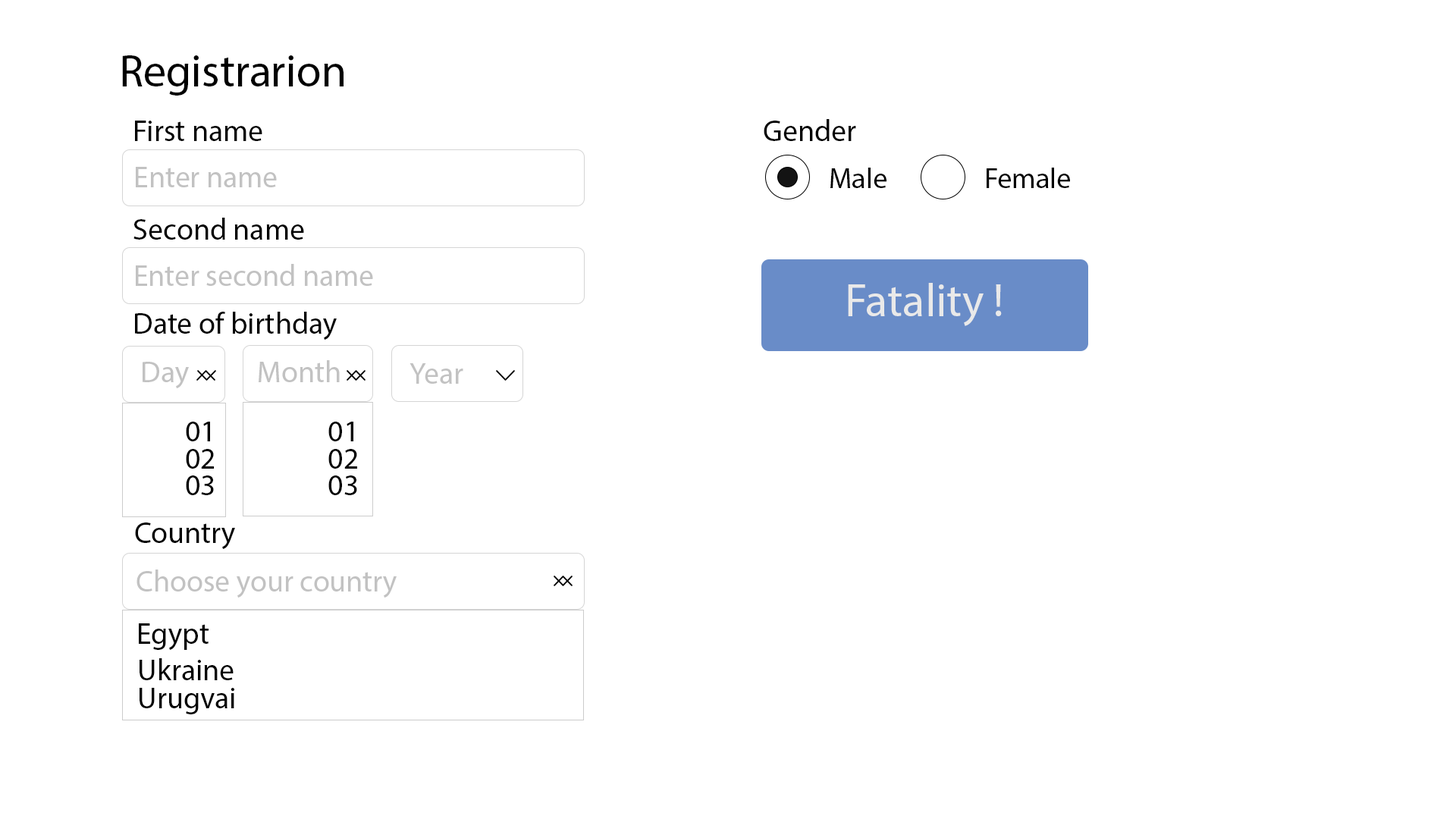
<style>
.page{position:relative;width:1456px;height:819px;background:#ffffff}
.page>*{position:absolute;margin:0}
.t1{font:45.2px "MyriadPro-Regular";color:#000000}
.t2{font:30.2px "MyriadPro-Regular";color:#000000}
.t3{font:30.2px "MyriadPro-Regular";color:#c2c2c2}
.t4{font:28.8px "MyriadPro-Regular";color:#000000}
.t5{font:46px "MyriadPro-Regular";color:#e9e9e9}
</style>
<div class="page">
<p class="t1" style="left:122px;top:55px;width:222px;height:41px">Registrarion</p>
<p class="t2" style="left:135px;top:121px;width:127px;height:20px">First name</p>
<p class="t2" style="left:764px;top:119px;width:92px;height:22px">Gender</p>
<p class="t3" style="left:136px;top:167px;width:141px;height:20px">Enter name</p>
<p class="t4" style="left:830px;top:168px;width:56px;height:20px">Male</p>
<p class="t4" style="left:987px;top:168px;width:83px;height:20px">Female</p>
<p class="t2" style="left:133px;top:218px;width:171px;height:22px">Second name</p>
<p class="t3" style="left:136px;top:264px;width:237px;height:22px">Enter second name</p>
<p class="t5" style="left:848px;top:283px;width:154px;height:43px">Fatality !</p>
<p class="t2" style="left:135px;top:312px;width:202px;height:28px">Date of birthday</p>
<p class="t3" style="left:143px;top:362px;width:46px;height:26px">Day</p>
<p class="t3" style="left:259px;top:360px;width:81px;height:22px">Month</p>
<p class="t3" style="left:409px;top:363px;width:54px;height:21px">Year</p>
<p class="t2" style="left:186px;top:422px;width:24px;height:19px">01</p>
<p class="t2" style="left:328px;top:422px;width:25px;height:19px">01</p>
<p class="t2" style="left:186px;top:449px;width:28px;height:20px">02</p>
<p class="t2" style="left:328px;top:449px;width:29px;height:20px">02</p>
<p class="t2" style="left:186px;top:475px;width:28px;height:20px">03</p>
<p class="t2" style="left:328px;top:475px;width:29px;height:20px">03</p>
<p class="t2" style="left:135px;top:522px;width:100px;height:27px">Country</p>
<p class="t3" style="left:136px;top:570px;width:261px;height:28px">Choose your country</p>
<p class="t2" style="left:139px;top:623px;width:70px;height:27px">Egypt</p>
<p class="t2" style="left:140px;top:658px;width:94px;height:22px">Ukraine</p>
<p class="t2" style="left:140px;top:688px;width:94px;height:26px">Urugvai</p>
</div>
